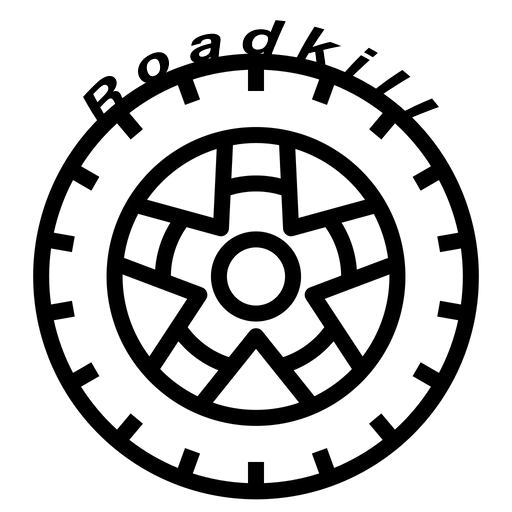
<style>
.page{position:relative;width:512px;height:512px;background:#ffffff}
.page>*{position:absolute;margin:0}
.t1{font:48px "AcuminConcept-BoldItalic";color:#000000}
</style>
<div class="page">
<p class="t1" style="left:83px;top:20px;width:356px;height:107px;text-align:center">R o a d k i l l</p>
</div>
